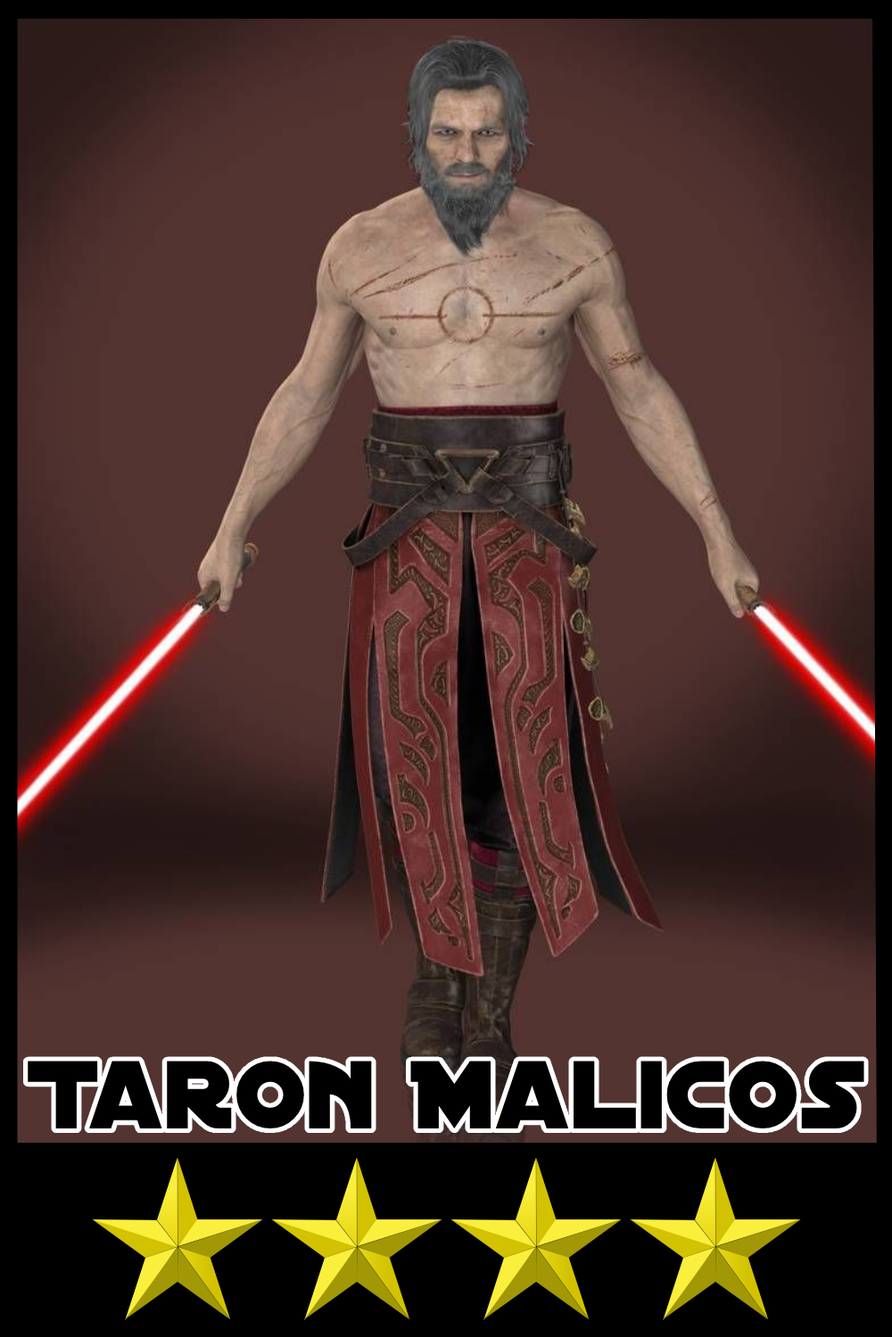
<style>
.page{position:relative;width:892px;height:1337px}
.page>*{position:absolute;margin:0}
.t1{font:103.7px "DistantGalaxy";color:#000000}
</style>
<div class="page">
<p class="t1" style="left:28px;top:1061px;width:836px;height:68px">Taron Malicos</p>
</div>
